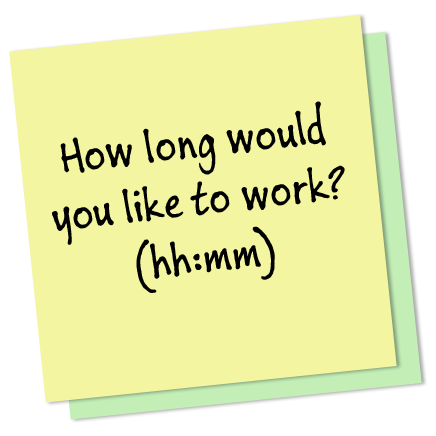
<style>
.page{position:relative;width:436px;height:436px;background:#f4f5a0}
.page>*{position:absolute;margin:0}
.t1{font:48px "BuxtonSketch";color:#010101}
</style>
<div class="page">
<p class="t1" style="left:52px;top:101px;width:293px;height:192px;text-align:center;rotate:-7deg">How long would<br>you like to work?<br>(hh:mm)</p>
</div>
